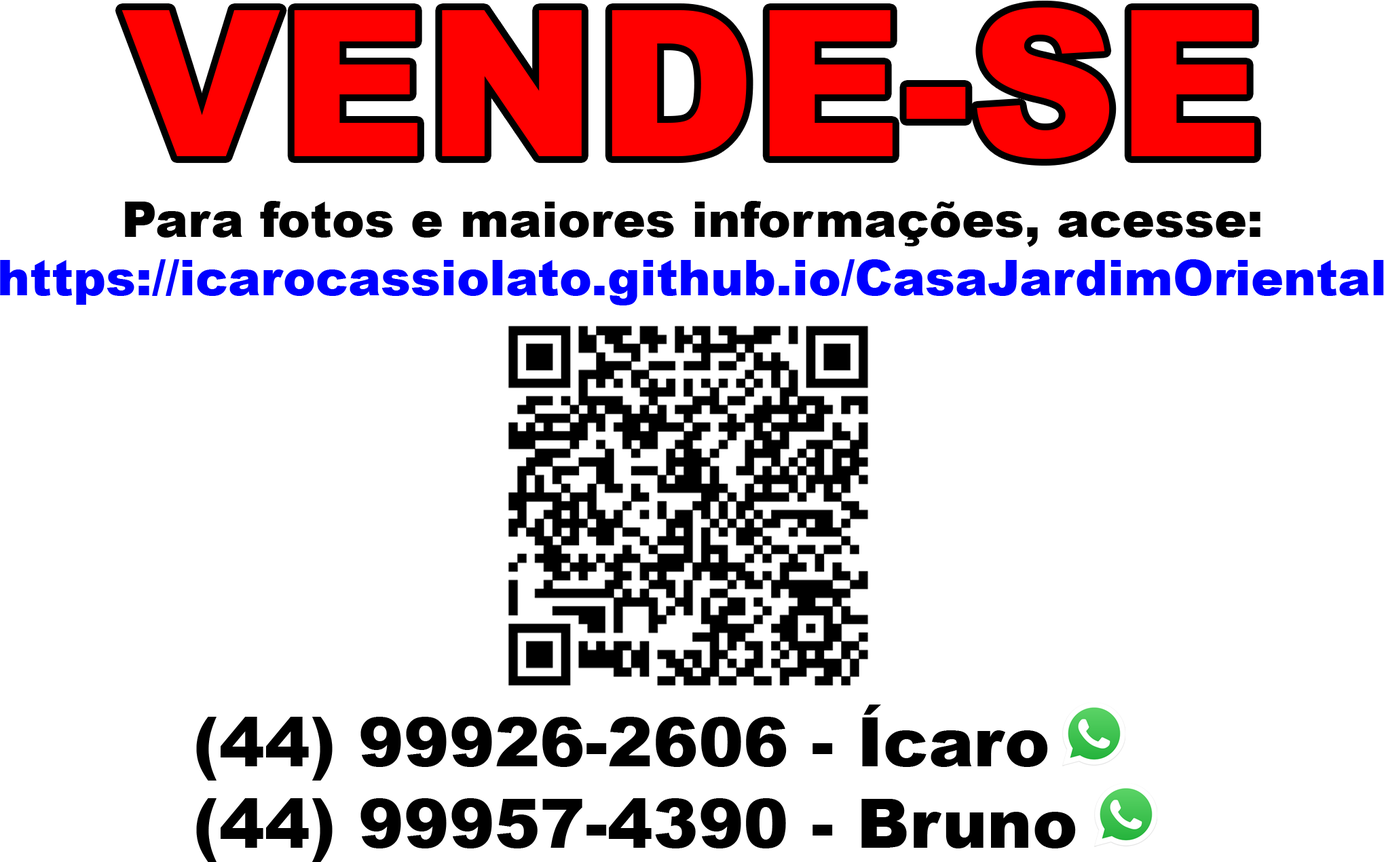
<style>
.page{position:relative;width:1384px;height:862px;background:#ffffff}
.page>*{position:absolute;margin:0}
.t1{font:48.9px "Arial-Black";color:#0000ff}
.t2{font:48.9px "Arial-Black";color:#000000}
.t3{font:67.9px "Arial-Black";color:#000000}
</style>
<div class="page">
<p class="t1" style="left:0px;top:201px;width:1384px;height:104px;text-align:center"><span class="t2">Para fotos e maiores informações, acesse:<br></span>https://icarocassiolato.github.io/CasaJardimOriental</p>
<p class="t3" style="left:196px;top:704px;width:880px;height:158px">(44) 99926-2606 - Ícaro<br>(44) 99957-4390 - Bruno</p>
</div>
